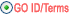
<style>
.page{position:relative;width:78px;height:16px;background:#ffffff}
.page>*{position:absolute;margin:0}
.t1{font:12px "ArialMT";color:#fa5f5f;font-weight:bold;scale:0.75 1}
.t2{font:12px "Wingdings2";color:#fa5f5f;font-weight:bold;scale:0.75 1}
</style>
<div class="page">
<p class="t1" style="left:4px;top:2px;width:66px;height:14px"><span class="t2">P</span> GO ID/Terms</p>
</div>
